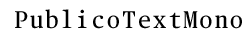
<style>
.page{position:relative;width:250px;height:40px;background:#ffffff}
.page>*{position:absolute;margin:0}
.t1{font:24px "PublicoTextMono-Roman";letter-spacing:0.062em;color:#000000}
</style>
<div class="page">
<p class="t1" style="left:15px;top:9px;width:227px;height:20px">PublicoTextMono</p>
</div>
